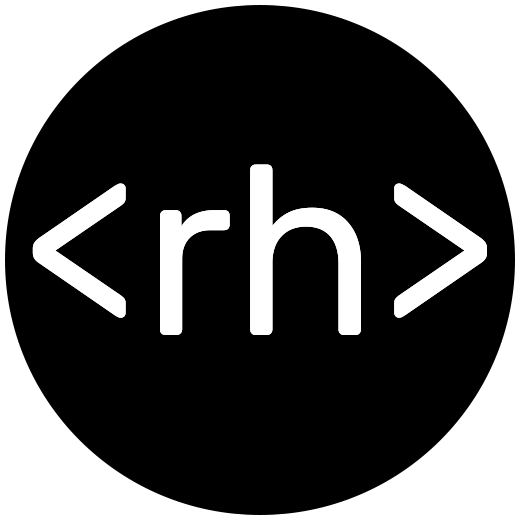
<style>
.page{position:relative;width:520px;height:520px;background:#000000}
.page>*{position:absolute;margin:0}
.t1{font:240px "Rubik-Regular";color:#ffffff}
</style>
<div class="page">
<p class="t1" style="left:32px;top:164px;width:455px;height:171px">&lt;rh&gt;</p>
</div>
